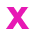
<style>
.page{position:relative;width:35px;height:35px;background:#ffffff}
.page>*{position:absolute;margin:0}
.t1{font:43.2px "HelveticaNeue-Bold";letter-spacing:0.025em;color:#e719b4}
</style>
<div class="page">
<p class="t1" style="left:6px;top:7px;width:24px;height:22px">x</p>
</div>
